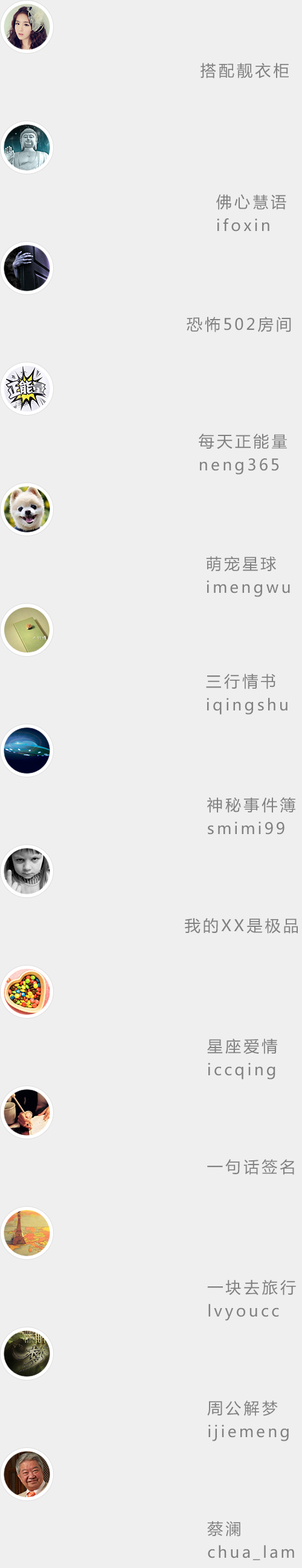
<style>
.page{position:relative;width:302px;height:1568px;background:#efefef}
.page>*{position:absolute;margin:0}
.t1{font:15.7px "MicrosoftYaHei";letter-spacing:0.16em;color:#808080}
.t2{font:15.7px/23.5px "MicrosoftYaHei";letter-spacing:0.16em;color:#808080}
</style>
<div class="page">
<p class="t1" style="left:200px;top:63px;width:88px;height:15px">搭配靓衣柜</p>
<p class="t2" style="left:216px;top:194px;width:70px;height:38px">佛心慧语<br>ifoxin</p>
<p class="t1" style="left:186px;top:317px;width:105px;height:15px">恐怖502房间</p>
<p class="t2" style="left:198px;top:434px;width:88px;height:41px">每天正能量<br>neng365</p>
<p class="t2" style="left:206px;top:556px;width:83px;height:41px">萌宠星球 <br>imengwu</p>
<p class="t2" style="left:206px;top:674px;width:81px;height:41px">三行情书 <br>iqingshu</p>
<p class="t2" style="left:207px;top:797px;width:88px;height:38px">神秘事件簿<br>smimi99</p>
<p class="t1" style="left:185px;top:918px;width:112px;height:16px">我的XX是极品</p>
<p class="t2" style="left:207px;top:1038px;width:70px;height:42px">星座爱情<br>iccqing</p>
<p class="t1" style="left:207px;top:1159px;width:87px;height:16px">一句话签名</p>
<p class="t2" style="left:207px;top:1280px;width:89px;height:41px">一块去旅行<br>lvyoucc</p>
<p class="t2" style="left:207px;top:1400px;width:81px;height:41px">周公解梦<br>ijiemeng</p>
<p class="t2" style="left:207px;top:1521px;width:87px;height:39px">蔡澜<br>chua_lam</p>
</div>
